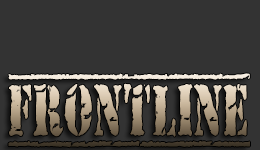
<style>
.page{position:relative;width:260px;height:150px;background:#333333}
.page>*{position:absolute;margin:0}
.t1{font:73.4px "OldStamper";scale:0.59 1}
</style>
<div class="page">
<p class="t1" style="left:8px;top:73px;width:242px;height:75px">FRONtLINE</p>
</div>
